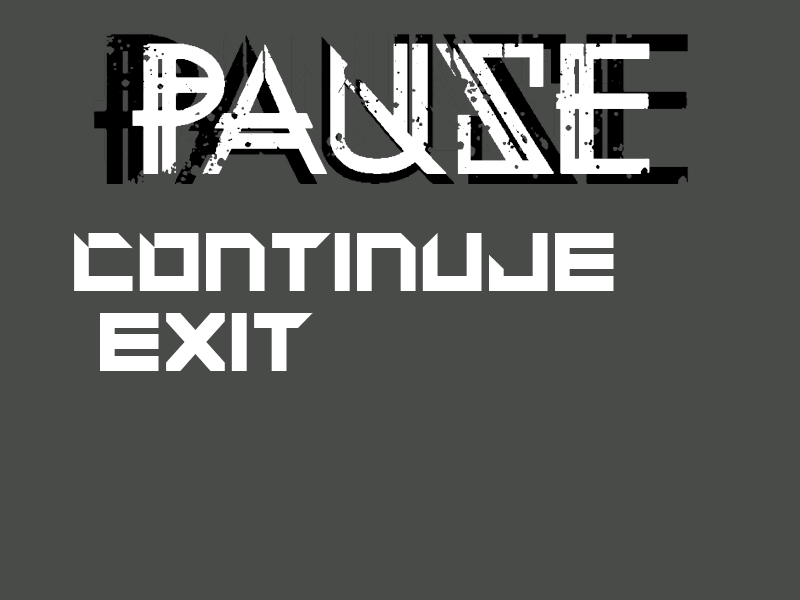
<style>
.page{position:relative;width:800px;height:600px;background:#494b49}
.page>*{position:absolute;margin:0}
.t1{font:150px "EternityTomorrow";color:#ffffff}
.t2{font:73.3px "MotorBlock";color:#ffffff}
</style>
<div class="page">
<p class="t1" style="left:132px;top:43px;width:518px;height:131px">pause</p>
<p class="t2" style="left:74px;top:233px;width:540px;height:58px">CONTINUJE</p>
<p class="t2" style="left:100px;top:313px;width:213px;height:58px">EXIT</p>
</div>
